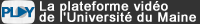
<style>
.page{position:relative;width:200px;height:24px;background:#333333}
.page>*{position:absolute;margin:0}
.t1{font:13px/11px "ArialMT";letter-spacing:0.04em;color:#ffffff;font-weight:bold}
.t2{font:14px "HelveticaNeue-Bold";letter-spacing:-0.1em;color:#005e98;font-weight:bold}
.t3{font:14px "HelveticaNeue-Bold";letter-spacing:-0.44em;color:#005e98;font-weight:bold}
.t4{font:14px "HelveticaNeue-Bold";color:#005e98;font-weight:bold}
</style>
<div class="page">
<p class="t1" style="left:39px;top:1px;width:157px;height:21px">La plateforme vidéo <br>de l'Université du Maine</p>
<p class="t2" style="left:2px;top:7px;width:33px;height:11px">P<span class="t3">L</span><span class="t4">   Y</span></p>
</div>
